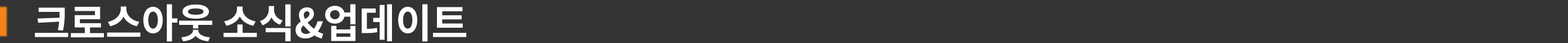
<style>
.page{position:relative;width:1568px;height:43px;background:#333333}
.page>*{position:absolute;margin:0}
.t1{font:39.9px "NotoSansCJKkr-Bold";letter-spacing:-0.015em;color:#ffffff}
</style>
<div class="page">
<p class="t1" style="left:35px;top:4px;width:432px;height:38px">크로스아웃 소식&amp;업데이트</p>
</div>
